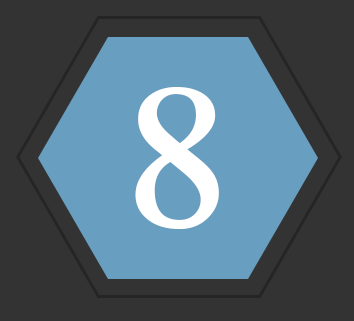
<style>
.page{position:relative;width:354px;height:321px;background:#333333}
.page>*{position:absolute;margin:0}
.t1{font:280px "Rod";color:#ffffff}
</style>
<div class="page">
<p class="t1" style="left:135px;top:86px;width:84px;height:143px">8</p>
</div>
